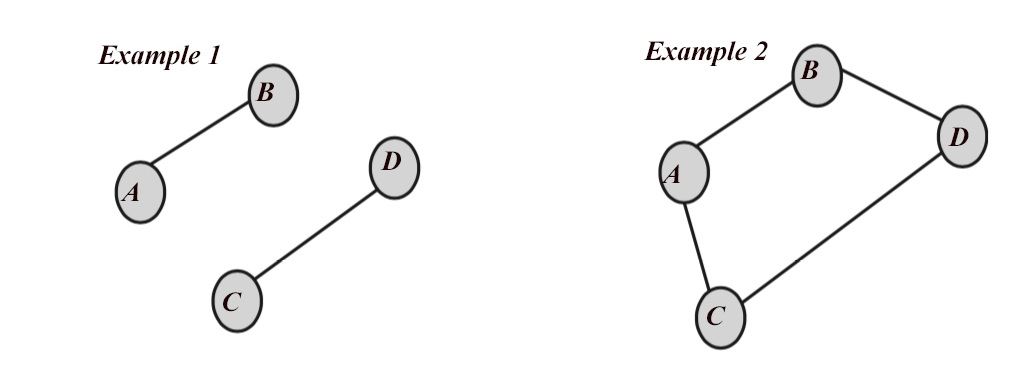
<style>
.page{position:relative;width:1030px;height:372px;background:#ffffff}
.page>*{position:absolute;margin:0}
.t1{font:28px "TimesNewRomanPS-BoldItalicMT";color:#1d0303}
</style>
<div class="page">
<p class="t1" style="left:643px;top:41px;width:125px;height:25px">Example 2</p>
<p class="t1" style="left:97px;top:45px;width:123px;height:25px">Example 1</p>
<p class="t1" style="left:799px;top:60px;width:20px;height:19px">B</p>
<p class="t1" style="left:255px;top:82px;width:19px;height:19px">B</p>
<p class="t1" style="left:948px;top:127px;width:21px;height:19px">D</p>
<p class="t1" style="left:380px;top:151px;width:21px;height:19px">D</p>
<p class="t1" style="left:661px;top:164px;width:19px;height:19px">A</p>
<p class="t1" style="left:120px;top:182px;width:19px;height:19px">A</p>
<p class="t1" style="left:223px;top:292px;width:19px;height:20px">C</p>
<p class="t1" style="left:707px;top:306px;width:19px;height:20px">C</p>
</div>
